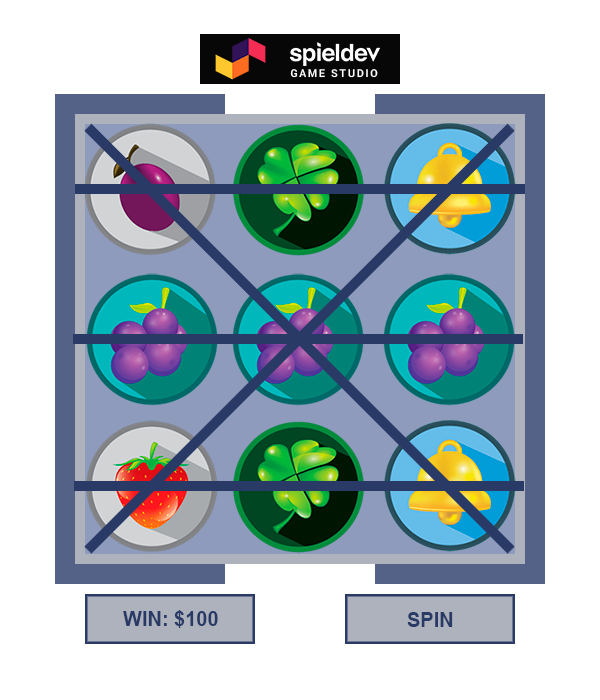
<style>
.page{position:relative;width:600px;height:700px;background:#ffffff}
.page>*{position:absolute;margin:0}
.t1{font:20px "Arial-BoldMT";color:#2a3a66}
</style>
<div class="page">
<p class="t1" style="left:123px;top:610px;width:95px;height:18px">WIN: $100</p>
<p class="t1" style="left:407px;top:612px;width:46px;height:15px">SPIN</p>
</div>
